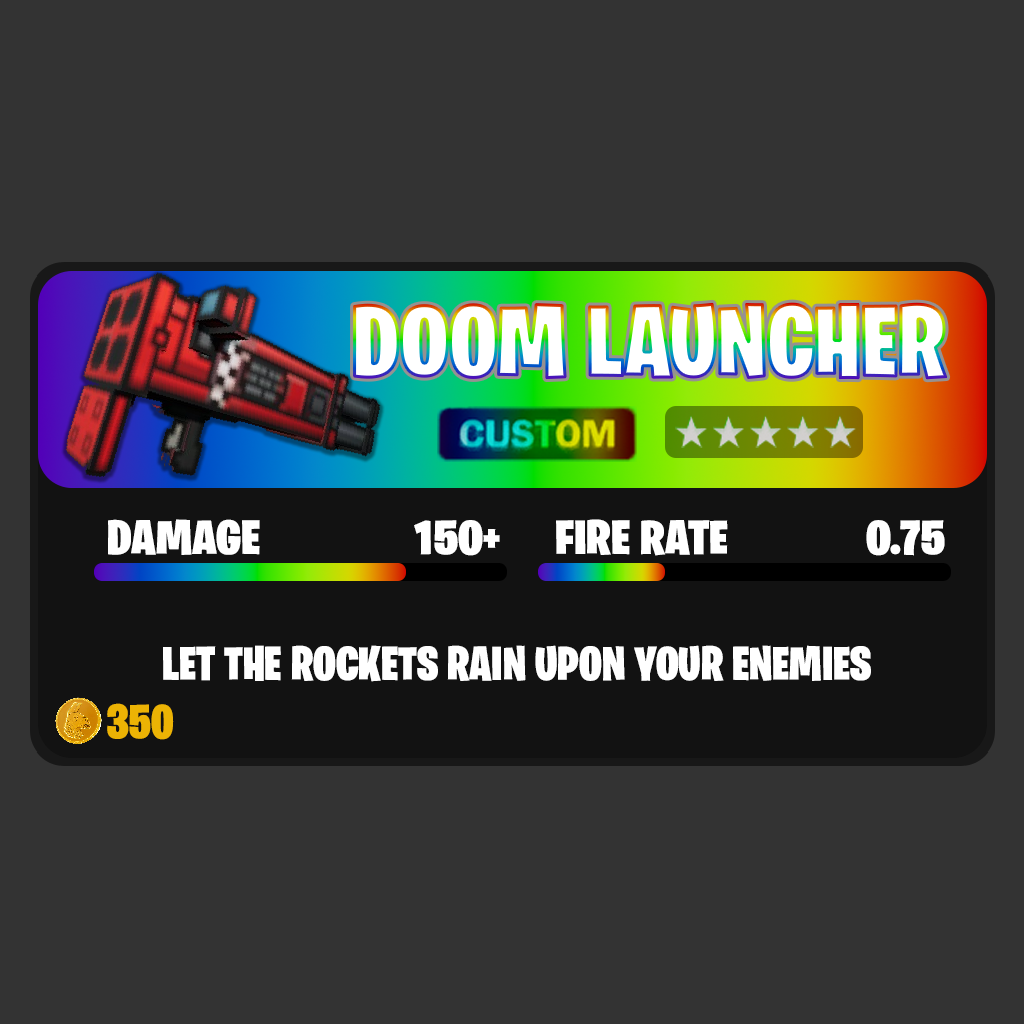
<style>
.page{position:relative;width:1024px;height:1024px;background:#333333}
.page>*{position:absolute;margin:0}
.t1{font:100.8px "BurbankBigCondensed-Black";color:#ffffff}
.t2{font:48.4px "BurbankBigCondensed-Black";color:#ffffff;scale:1.1 1}
.t3{font:48.3px "BurbankBigCondensed-Black";color:#ffffff;scale:1.1 1}
.t4{font:48px "BurbankBigCondensed-Black";color:#ffffff}
.t5{font:48px "BurbankBigCondensed-Black";color:#ecb304}
</style>
<div class="page">
<p class="t1" style="left:354px;top:303px;width:593px;height:76px">DOOM LAUNCHER</p>
<p class="t2" style="left:108px;top:519px;width:152px;height:36px">DAMAGE</p>
<p class="t2" style="left:414px;top:520px;width:86px;height:36px">150+</p>
<p class="t3" style="left:556px;top:519px;width:172px;height:37px">FIRE RATE</p>
<p class="t3" style="left:866px;top:520px;width:79px;height:36px">0.75</p>
<p class="t4" style="left:163px;top:645px;width:708px;height:37px">LET THE ROCKETS RAIN UPON YOUR ENEMIES</p>
<p class="t5" style="left:107px;top:703px;width:67px;height:37px">350</p>
</div>
